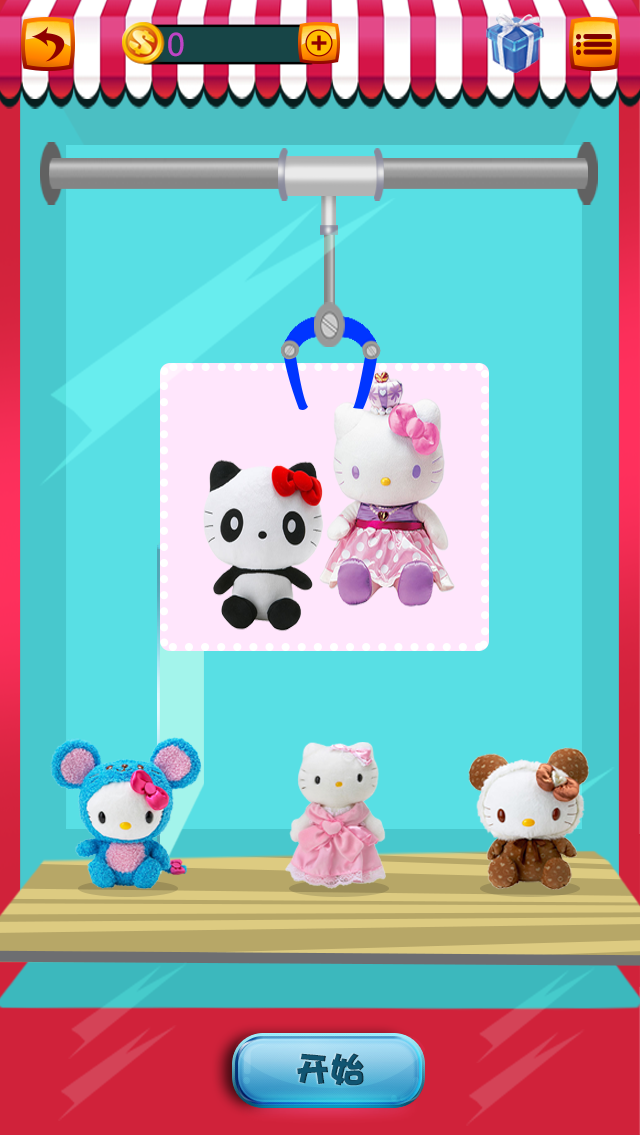
<style>
.page{position:relative;width:640px;height:1135px;background:#58dfe4}
.page>*{position:absolute;margin:0}
.t1{font:30px "MicrosoftYaHei";letter-spacing:0.26em;color:#be44c6}
.t2{font:35px "DFPHaiBaoW12";color:#115572}
</style>
<div class="page">
<p class="t1" style="left:168px;top:32px;width:16px;height:25px">0</p>
<p class="t2" style="left:297px;top:1053px;width:67px;height:33px">开始</p>
</div>
